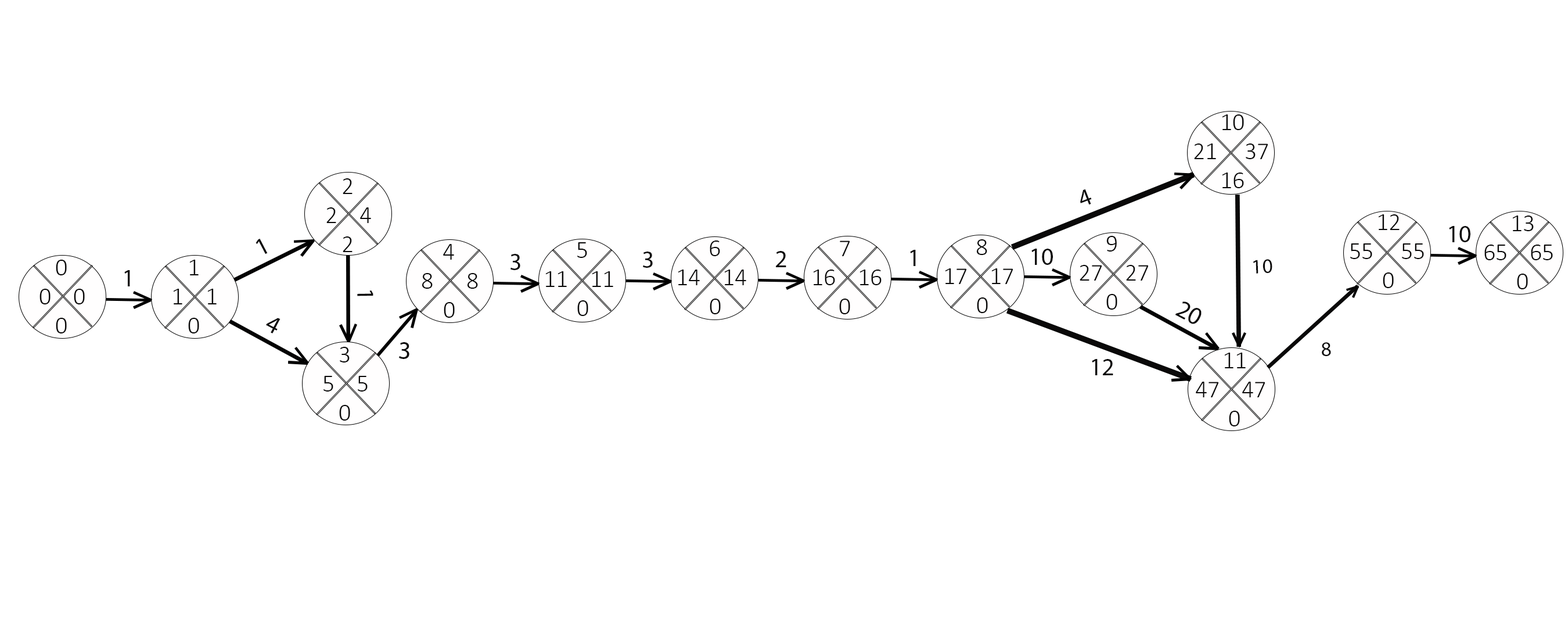
<style>
.page{position:relative;width:1568px;height:639px;background:#ffffff}
.page>*{position:absolute;margin:0}
.t1{font:24.2px "Calibri-Light";color:#0a0909}
.t2{font:24.2px "MyriadPro-Regular";color:#0a0909}
.t3{font:25px "MyriadPro-Regular";color:#0a0909}
.t4{font:20.5px "MyriadPro-Regular";color:#0a0909}
.t5{font:24.4px "MyriadPro-Regular";color:#0a0909}
</style>
<div class="page">
<p class="t1" style="left:1194px;top:114px;width:74px;height:74px"><span class="t2"> </span>    10<br>21     37<br>     16</p>
<p class="t1" style="left:326px;top:178px;width:45px;height:74px"><span class="t2"> </span>  2<br>2    4<br>   2</p>
<p class="t2" style="left:1080px;top:189px;width:12px;height:16px;rotate:-21deg">4</p>
<p class="t1" style="left:1350px;top:214px;width:74px;height:74px"><span class="t2"> </span>    12<br>55     55<br>      0</p>
<p class="t1" style="left:1484px;top:215px;width:69px;height:74px"><span class="t2"> </span>    13<br>65    65<br>      0</p>
<p class="t2" style="left:1449px;top:226px;width:21px;height:16px">10</p>
<p class="t3" style="left:256px;top:238px;width:12px;height:16px;rotate:-27deg">1</p>
<p class="t1" style="left:422px;top:244px;width:56px;height:74px"><span class="t2"> </span>   4<br>8      8<br>    0</p>
<p class="t1" style="left:545px;top:242px;width:68px;height:74px"><span class="t2"> </span>     5<br>11    11<br>      0</p>
<p class="t1" style="left:678px;top:240px;width:68px;height:74px"><span class="t2"> </span>     6<br>14    14<br>      0</p>
<p class="t1" style="left:813px;top:240px;width:69px;height:74px"><span class="t2"> </span>    7<br>16    16<br>     0</p>
<p class="t1" style="left:945px;top:239px;width:68px;height:74px"><span class="t2"> </span>     8<br>17    17<br>      0</p>
<p class="t1" style="left:1080px;top:236px;width:68px;height:74px"><span class="t2"> </span>    9<br>27    27<br>     0</p>
<p class="t2" style="left:510px;top:254px;width:10px;height:16px">3</p>
<p class="t2" style="left:643px;top:251px;width:10px;height:17px">3</p>
<p class="t2" style="left:776px;top:251px;width:10px;height:16px">2</p>
<p class="t2" style="left:910px;top:250px;width:6px;height:16px">1</p>
<p class="t2" style="left:1031px;top:249px;width:22px;height:16px">10</p>
<p class="t1" style="left:39px;top:260px;width:46px;height:73px"><span class="t2"> </span>  0<br>0    0<br>   0</p>
<p class="t1" style="left:173px;top:260px;width:44px;height:73px"><span class="t2"> </span>  1<br>1    1<br>   0</p>
<p class="t4" style="left:1253px;top:259px;width:19px;height:15px;rotate:-2deg">10</p>
<p class="t2" style="left:124px;top:270px;width:6px;height:16px">1</p>
<p class="t5" style="left:357px;top:290px;width:16px;height:6px;rotate:89deg">1</p>
<p class="t3" style="left:1175px;top:301px;width:27px;height:23px;rotate:28deg">20</p>
<p class="t3" style="left:266px;top:318px;width:14px;height:15px;rotate:28deg">4</p>
<p class="t1" style="left:323px;top:347px;width:45px;height:73px"><span class="t2"> </span>  3<br>5    5<br>   0</p>
<p class="t3" style="left:399px;top:342px;width:10px;height:17px;rotate:3deg">3</p>
<p class="t1" style="left:1196px;top:353px;width:69px;height:73px"><span class="t2"> </span>    11<br>47    47<br>      0</p>
<p class="t4" style="left:1322px;top:342px;width:9px;height:14px;rotate:-2deg">8</p>
<p class="t2" style="left:1092px;top:359px;width:21px;height:16px">12</p>
</div>
